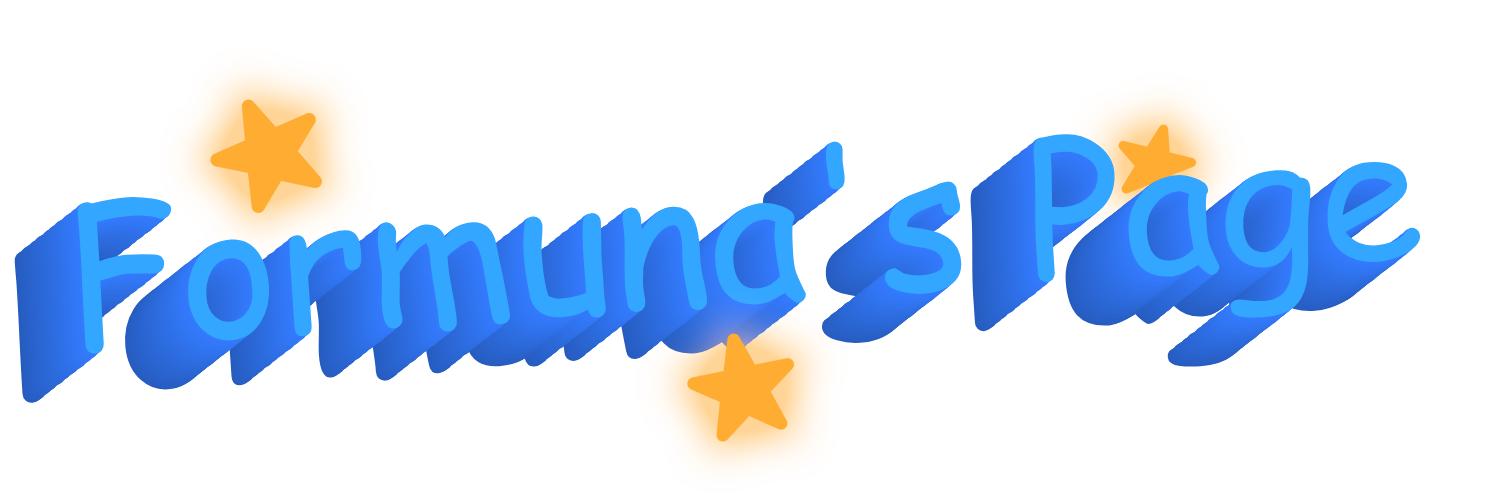
<style>
.page{position:relative;width:1500px;height:500px;background:#ffffff}
.page>*{position:absolute;margin:0}
.t1{font:187.9px "ComicSansMS";color:#33a6ff}
</style>
<div class="page">
<p class="t1" style="left:77px;top:134px;width:1344px;height:220px;rotate:-4deg">Formuna's Page</p>
</div>
